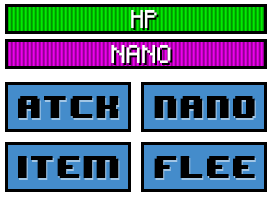
<style>
.page{position:relative;width:272px;height:200px;background:#448ccb}
.page>*{position:absolute;margin:0}
.t1{font:20.5px "Minecraftia";color:#ffffff;scale:0.9 1}
.t2{font:20.5px "Minecraftia";color:#ffffff}
.t3{font:26.1px "8BITWONDERNominal";color:#000000}
</style>
<div class="page">
<p class="t1" style="left:131px;top:10px;width:26px;height:18px">HP</p>
<p class="t2" style="left:111px;top:45px;width:60px;height:18px">NANO</p>
<p class="t3" style="left:18px;top:96px;width:101px;height:22px">ATCK</p>
<p class="t3" style="left:154px;top:96px;width:101px;height:22px">NANO</p>
<p class="t3" style="left:18px;top:156px;width:101px;height:22px">ITEM</p>
<p class="t3" style="left:154px;top:156px;width:101px;height:22px">FLEE</p>
</div>
